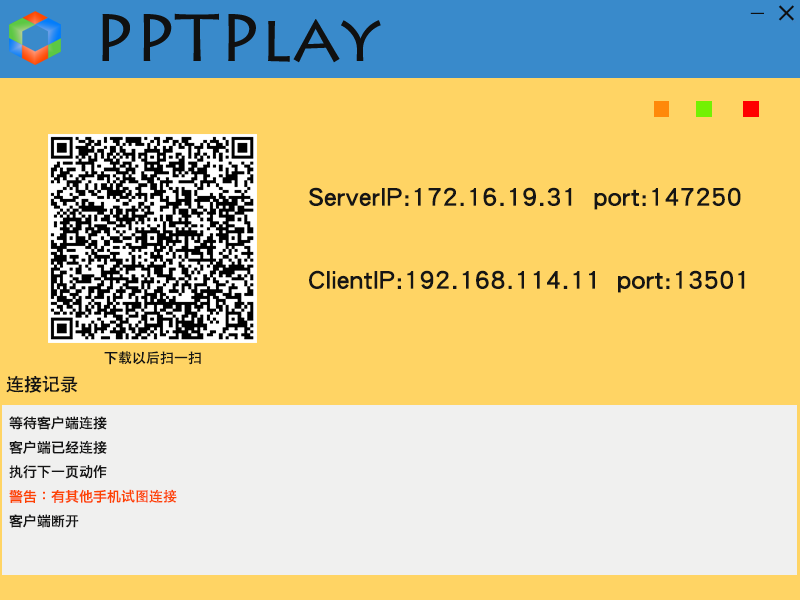
<style>
.page{position:relative;width:800px;height:600px;background:#ffd464}
.page>*{position:absolute;margin:0}
.t1{font:23px "AdobeHeitiStd-Regular";color:#101010}
.t2{font:24px "LiHeiPro";color:#151515}
.t3{font:14px "AdobeHeitiStd-Regular";color:#151515}
.t4{font:14px "LiHeiPro";color:#151515}
.t5{font:18px "AdobeHeitiStd-Regular";color:#151515}
.t6{font:18px "LiHeiPro";color:#151515}
.t7{font:14px "LiHeiPro";color:#fd4302}
.t8{font:14px "AdobeHeitiStd-Regular";color:#fd4302}
</style>
<div class="page">
<p class="t1" style="left:778px;top:5px;width:16px;height:16px">×</p>
<p class="t1" style="left:750px;top:12px;width:14px;height:2px">_</p>
<p class="t2" style="left:309px;top:187px;width:432px;height:23px">ServerIP:172.16.19.31  port:147250</p>
<p class="t2" style="left:309px;top:270px;width:436px;height:23px">ClientIP:192.168.114.11  port:13501</p>
<p class="t3" style="left:104px;top:351px;width:97px;height:14px"><span class="t2">    </span><span class="t4">下</span>载以后扫<span class="t4">一</span>扫</p>
<p class="t5" style="left:6px;top:375px;width:72px;height:18px">连<span class="t6">接</span>记<span class="t6">录</span></p>
<p class="t4" style="left:9px;top:416px;width:168px;height:112px">等待客户端<span class="t3">连</span>接<br>客户端已经<span class="t3">连</span>接<br>执行下一页动作<br><span class="t7">警告：有其他手机</span><span class="t8">试图连接<br></span>客户端断<span class="t3">开</span></p>
</div>
